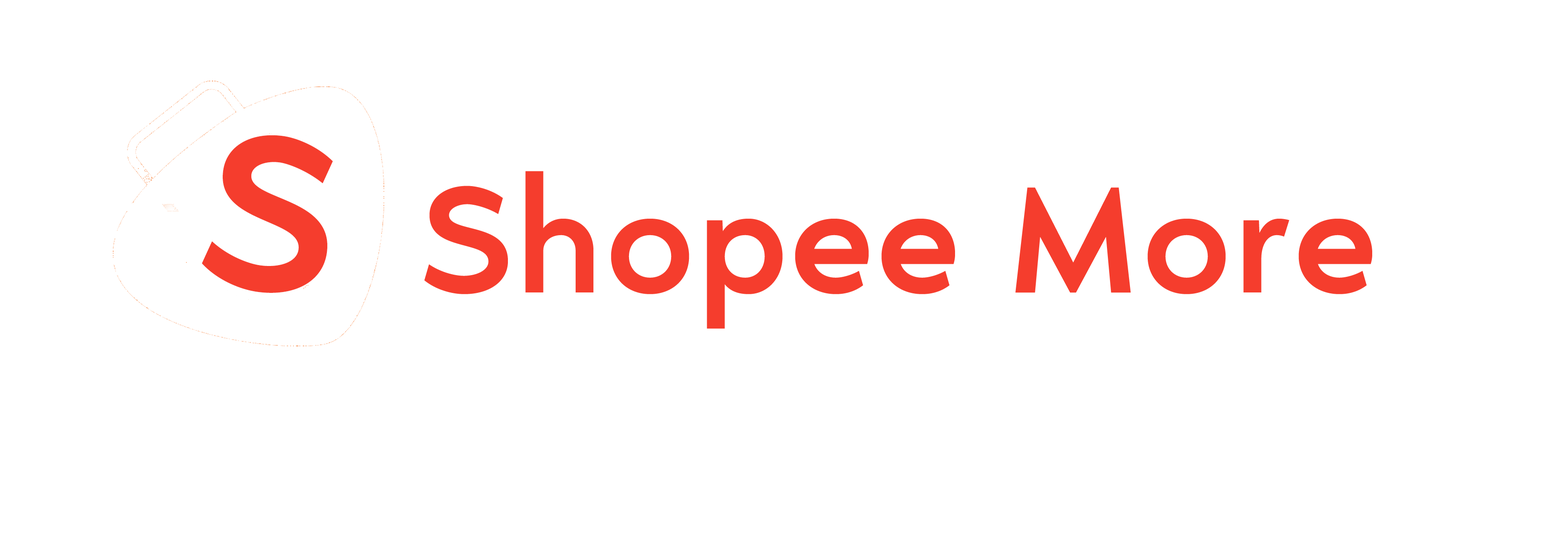
<style>
.page{position:relative;width:1568px;height:535px;background:#ffffff}
.page>*{position:absolute;margin:0}
.t1{font:239.2px "NyataFTR-Regular";letter-spacing:0.015em;color:#f53d2d;scale:1.04 1}
.t2{font:163.9px "NyataFTR-Regular";letter-spacing:0.015em;color:#f53d2d;scale:1.04 1}
</style>
<div class="page">
<p class="t1" style="left:202px;top:135px;width:131px;height:158px;rotate:8deg">S</p>
<p class="t2" style="left:424px;top:171px;width:948px;height:158px">Shopee More</p>
</div>
